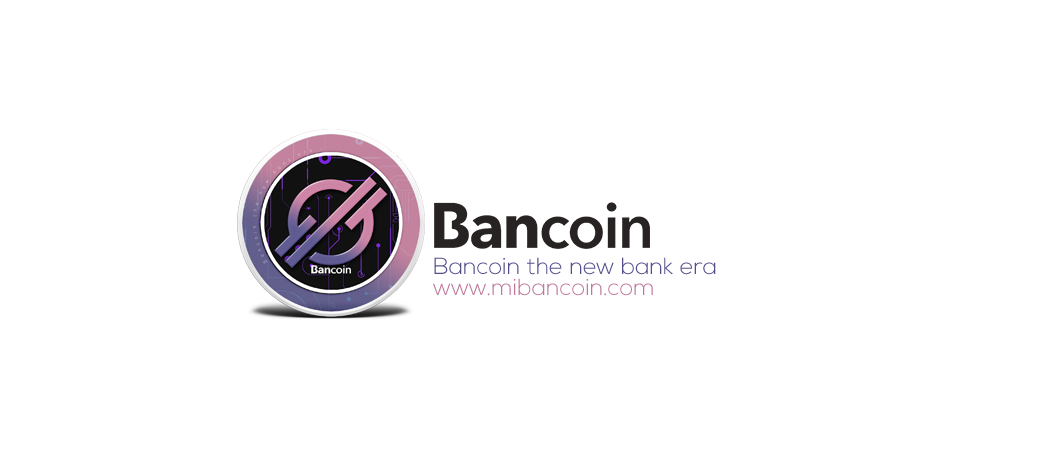
<style>
.page{position:relative;width:1050px;height:450px;background:#ffffff}
.page>*{position:absolute;margin:0}
.t1{font:23px "NexaLight";color:#524e89}
.t2{font:23px "NexaLight";color:#bf789c}
</style>
<div class="page">
<p class="t1" style="left:434px;top:257px;width:282px;height:18px">Bancoin the new bank era</p>
<p class="t2" style="left:433px;top:278px;width:220px;height:18px">www.mibancoin.com</p>
</div>
